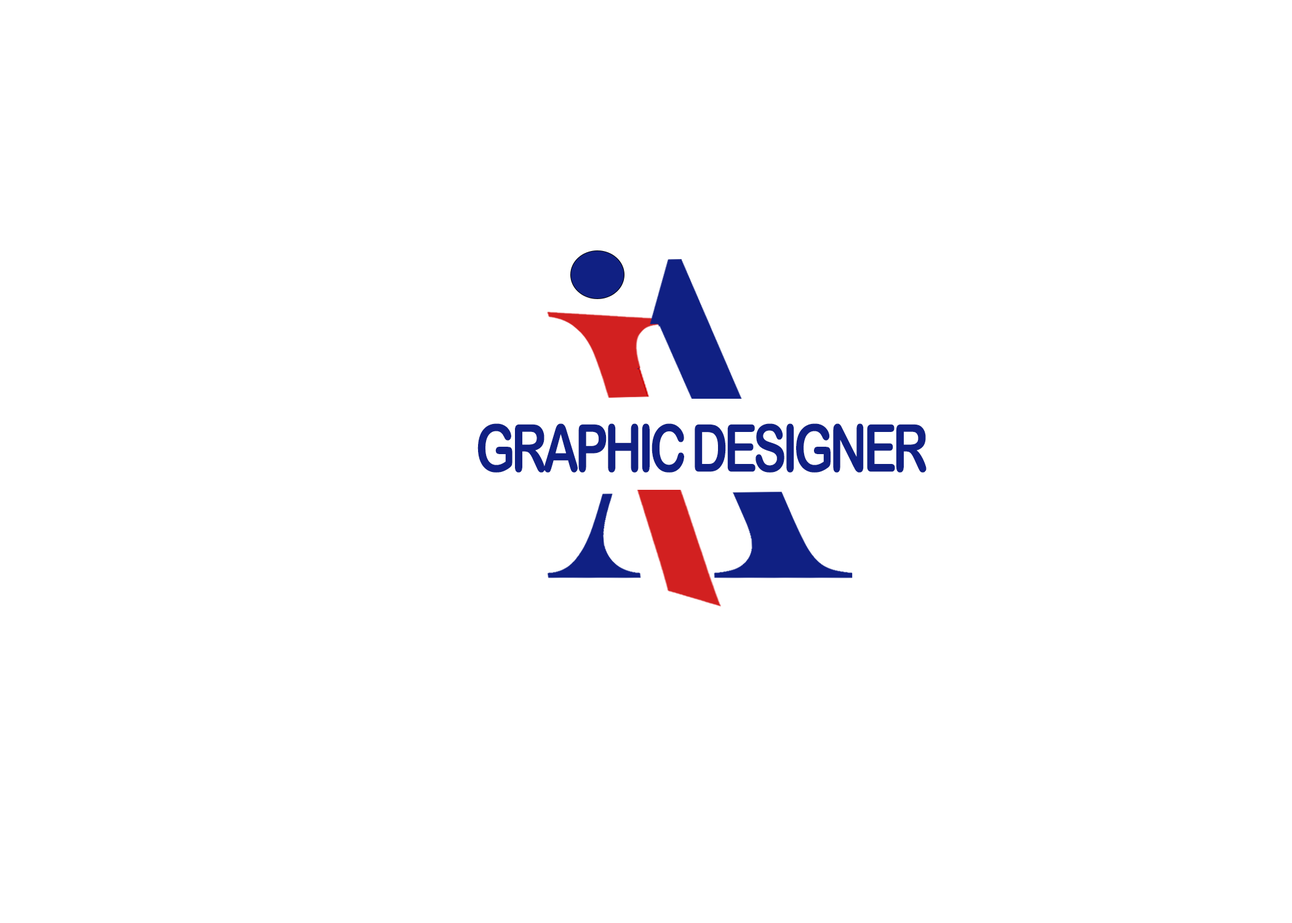
<style>
.page{position:relative;width:1292px;height:923px;background:#ffffff}
.page>*{position:absolute;margin:0}
.t1{font:65.8px "ArialRoundedMTBold";letter-spacing:-0.08em;color:#102083;scale:0.76 1}
</style>
<div class="page">
<p class="t1" style="left:477px;top:423px;width:450px;height:50px">GRAPHIC DESIGNER</p>
</div>
